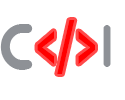
<style>
.page{position:relative;width:125px;height:100px;background:#ffffff}
.page>*{position:absolute;margin:0}
.t1{font:66.1px "LeelawadeeUI-Bold";color:#ff0000;scale:0.54 1}
.t2{font:60.3px "MonoglycerideBold";color:#8e9196}
</style>
<div class="page">
<p class="t1" style="left:37px;top:20px;width:58px;height:54px">&lt;/&gt;</p>
<p class="t2" style="left:103px;top:25px;width:8px;height:42px">l</p>
</div>
